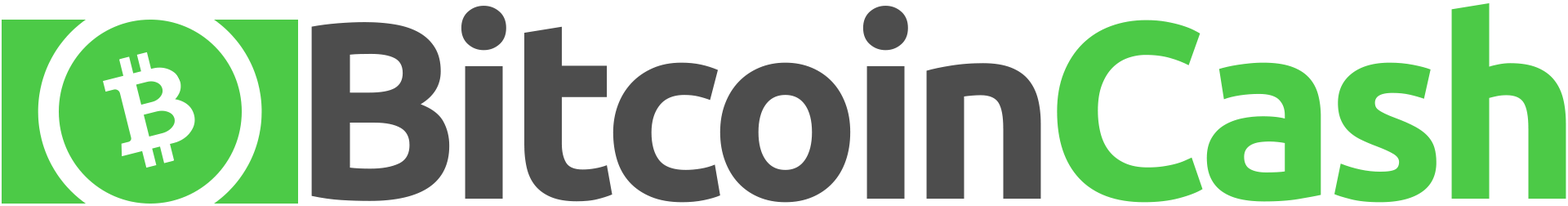
<style>
.page{position:relative;width:1568px;height:206px;background:#ffffff}
.page>*{position:absolute;margin:0}
.t1{font:251.5px "Ubuntu-Bold";letter-spacing:-0.05em;color:#4d4d4d}
.t2{font:251.5px "Ubuntu-Bold";letter-spacing:-0.05em;color:#4cca47}
</style>
<div class="page">
<p class="t1" style="left:311px;top:2px;width:1255px;height:201px">Bitcoin<span class="t2">Cash</span></p>
</div>
